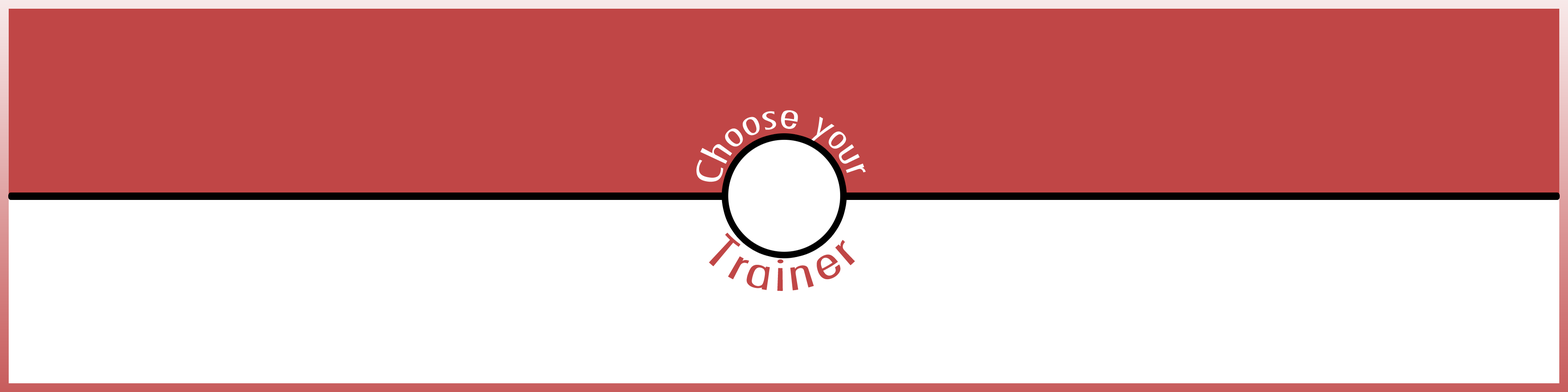
<style>
.page{position:relative;width:1568px;height:392px;background:#ffffff}
.page>*{position:absolute;margin:0}
.t1{font:37.3px "FuturaCondensedBQ-Light";letter-spacing:0.025em;color:#ffffff}
.t2{font:48.2px "FuturaCondensedBQ-Light";letter-spacing:0.025em;color:#c04646}
</style>
<div class="page">
<p class="t1" style="left:696px;top:110px;width:102px;height:72px;rotate:-36deg">Choose</p>
<p class="t1" style="left:811px;top:117px;width:55px;height:56px;rotate:51deg">your</p>
<p class="t2" style="left:709px;top:233px;width:146px;height:58px">Trainer</p>
</div>
